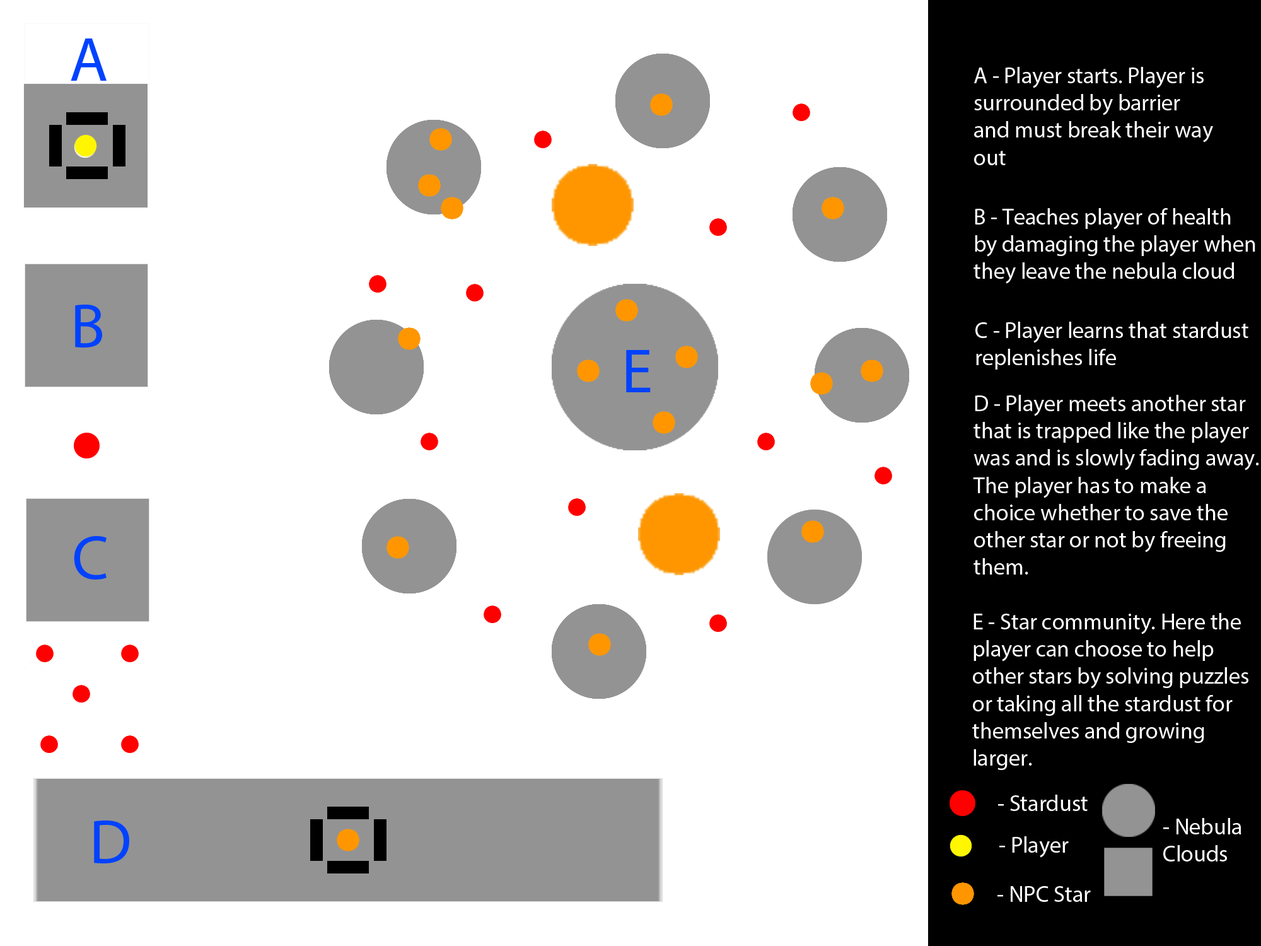
<style>
.page{position:relative;width:1261px;height:946px;background:#ffffff}
.page>*{position:absolute;margin:0}
.t1{font:63px "MyriadPro-Regular";color:#0042ff}
.t2{font:22.7px "MyriadPro-Regular";color:#ffffff}
</style>
<div class="page">
<p class="t1" style="left:71px;top:38px;width:36px;height:43px">A</p>
<p class="t2" style="left:974px;top:67px;width:239px;height:98px">A - Player starts. Player is <br>surrounded by barrier<br>and must break their way<br>out</p>
<p class="t2" style="left:973px;top:208px;width:282px;height:76px">B - Teaches player of health<br>by damaging the player when<br>they leave the nebula cloud</p>
<p class="t1" style="left:75px;top:305px;width:27px;height:42px">B</p>
<p class="t2" style="left:975px;top:322px;width:273px;height:47px">C - Player learns that stardust<br>replenishes life</p>
<p class="t1" style="left:626px;top:350px;width:25px;height:42px">E</p>
<p class="t2" style="left:973px;top:395px;width:286px;height:179px">D - Player meets another star<br>that is trapped like the player<br>was and is slowly fading away.<br>The player has to make a <br>choice whether to save the<br>other star or not by freeing<br>them.</p>
<p class="t1" style="left:74px;top:536px;width:33px;height:43px">C</p>
<p class="t2" style="left:972px;top:613px;width:276px;height:157px">E - Star community. Here the<br>player can choose to help <br>other stars by solving puzzles<br>or taking all the stardust for <br>themselves and growing<br>larger.</p>
<p class="t2" style="left:998px;top:794px;width:90px;height:17px">- Stardust</p>
<p class="t1" style="left:94px;top:820px;width:35px;height:43px">D</p>
<p class="t2" style="left:1163px;top:818px;width:78px;height:43px">- Nebula<br>Clouds</p>
<p class="t2" style="left:999px;top:836px;width:70px;height:21px">- Player</p>
<p class="t2" style="left:997px;top:886px;width:94px;height:16px">- NPC Star</p>
</div>
